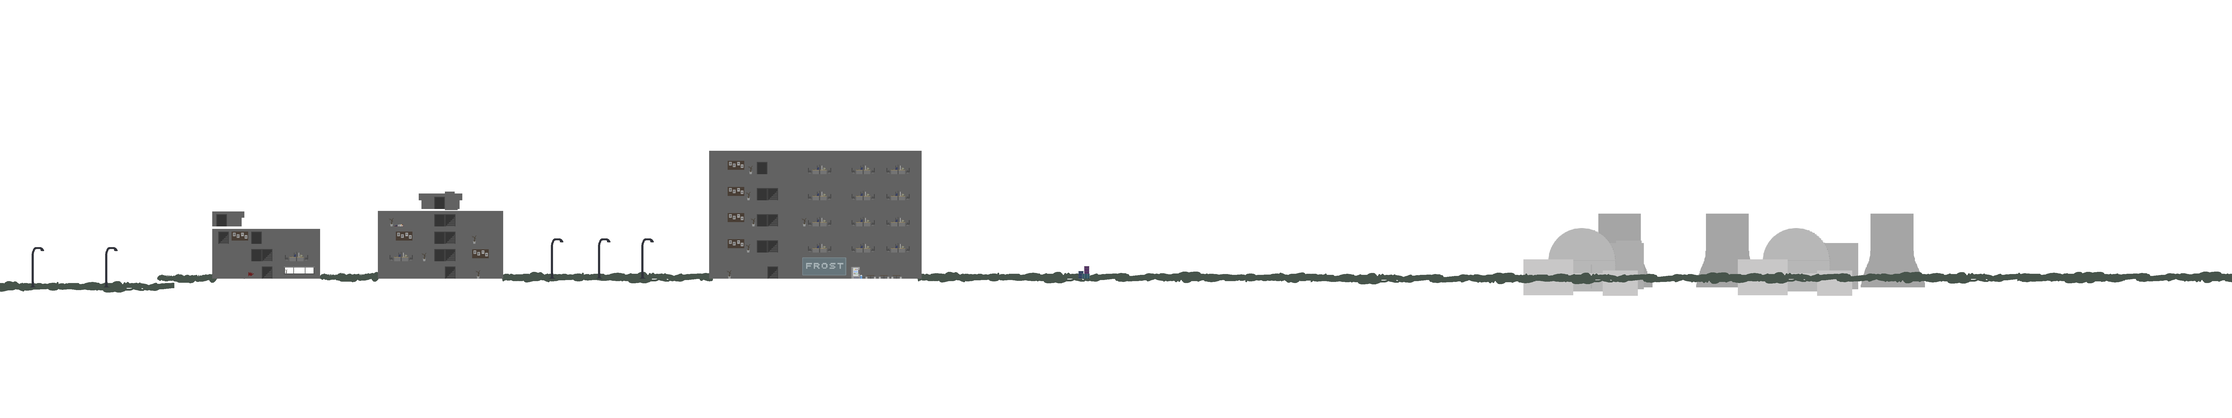
<style>
.page{position:relative;width:2232px;height:418px;background:#ffffff}
.page>*{position:absolute;margin:0}
.t1{font:9px "Uni0554";color:#a8b4b8}
</style>
<div class="page">
<p class="t1" style="left:806px;top:263px;width:37px;height:6px">FROST</p>
</div>
